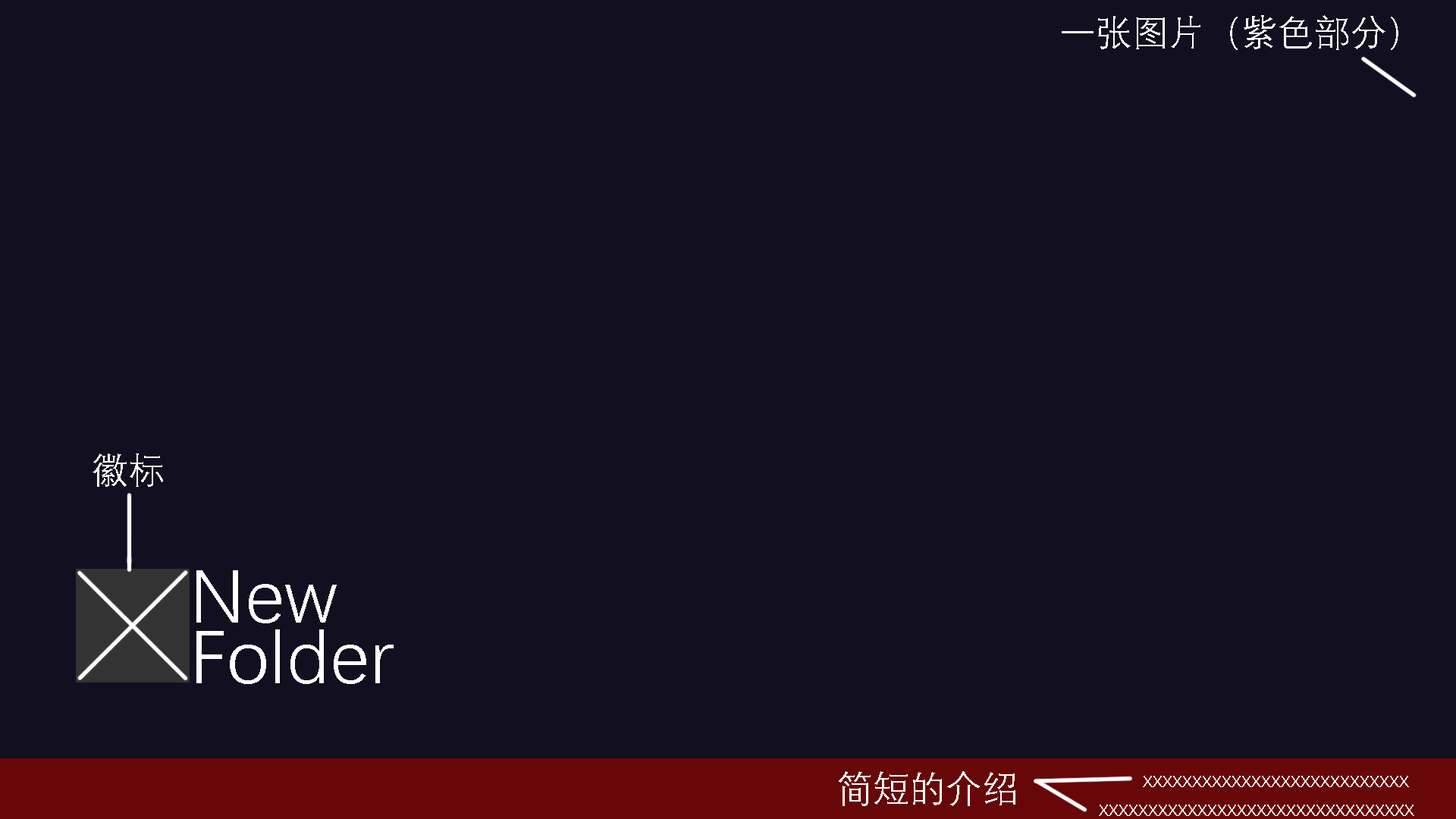
<style>
.page{position:relative;width:1456px;height:819px;background:#110f20}
.page>*{position:absolute;margin:0}
.t1{font:36.4px "DengXian-Regular";color:#ffffff}
.t2{font:75.8px/60.7px "DengXian-Regular";color:#ffffff}
.t3{font:22.7px "DengXian-Regular";color:#ffffff}
</style>
<div class="page">
<p class="t1" style="left:1062px;top:15px;width:336px;height:35px">一张图片（紫色部分）</p>
<p class="t1" style="left:93px;top:453px;width:70px;height:34px">徽标</p>
<p class="t2" style="left:196px;top:570px;width:198px;height:114px">New<br>Folder</p>
<p class="t1" style="left:839px;top:771px;width:176px;height:35px">简短的介绍</p>
<p class="t3" style="left:1143px;top:776px;width:266px;height:11px">xxxxxxxxxxxxxxxxxxxxxxxxxxx</p>
<p class="t3" style="left:1099px;top:805px;width:315px;height:11px">xxxxxxxxxxxxxxxxxxxxxxxxxxxxxxxx</p>
</div>
